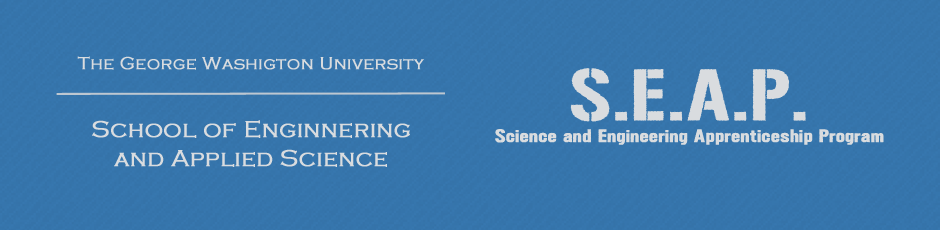
<style>
.page{position:relative;width:940px;height:230px}
.page>*{position:absolute;margin:0}
.t1{font:18px "CopperplateGothic-Light";letter-spacing:0.004em;color:#d9dcdf;font-weight:bold}
.t2{font:18px "UrbanSketch";letter-spacing:0.004em;color:#d9dcdf;font-weight:bold}
.t3{font:72px "UrbanSketch";letter-spacing:0.004em;color:#d9dcdf;font-weight:bold}
.t4{font:24px "CopperplateGothic-Light";letter-spacing:0.004em;color:#d9dcdf;font-weight:bold}
</style>
<div class="page">
<p class="t1" style="left:77px;top:56px;width:347px;height:14px">The George Washigton University</p>
<p class="t2" style="left:495px;top:68px;width:389px;height:77px;text-align:center"><span class="t3">S.E.A.P.<br></span>Science and Engineering Apprenticeship Program</p>
<p class="t4" style="left:92px;top:120px;width:318px;height:47px;text-align:center">School of Enginnering and Applied Science</p>
</div>
